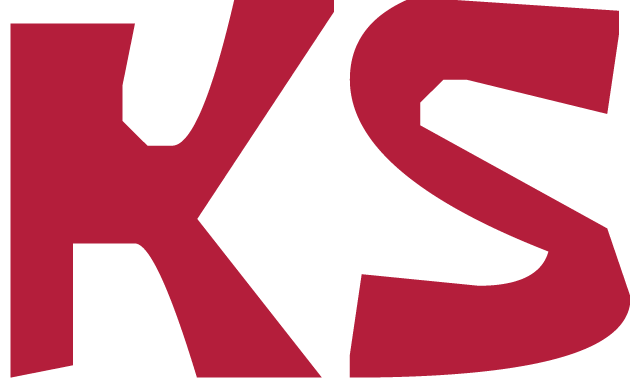
<style>
.page{position:relative;width:630px;height:378px;background:#b41e3b}
.page>*{position:absolute;margin:0}
.t1{font:504.2px "KrabbyPatty";letter-spacing:-0.02em;color:#b41e3b}
</style>
<div class="page">
<p class="t1" style="left:10px;top:0px;width:621px;height:378px">KS</p>
</div>
